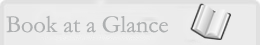
<style>
.page{position:relative;width:260px;height:45px;background:#ebebeb}
.page>*{position:absolute;margin:0}
.t1{font:24.5px "Garamond";letter-spacing:-0.005em;color:#aeb0b1}
</style>
<div class="page">
<p class="t1" style="left:6px;top:15px;width:162px;height:18px">Book at a Glance</p>
</div>
